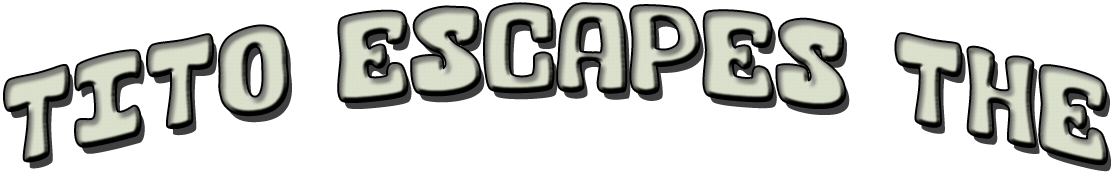
<style>
.page{position:relative;width:1118px;height:176px;background:#ffffff}
.page>*{position:absolute;margin:0}
.t1{font:87.3px "BlackCarrot";letter-spacing:-0.025em;scale:0.85 1}
</style>
<div class="page">
<p class="t1" style="left:5px;top:4px;width:1101px;height:160px">Tito Escapes the</p>
</div>
